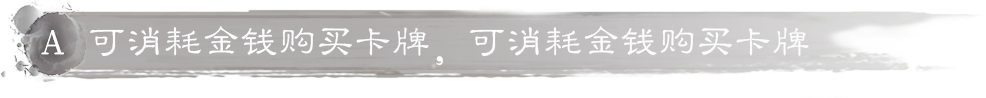
<style>
.page{position:relative;width:986px;height:98px;background:#ffffff}
.page>*{position:absolute;margin:0}
.t1{font:38px "FZLBJW--GB1-0";color:#ffffff}
</style>
<div class="page">
<p class="t1" style="left:90px;top:26px;width:719px;height:40px">可消耗金钱购买卡牌，可消耗金钱购买卡牌</p>
</div>
